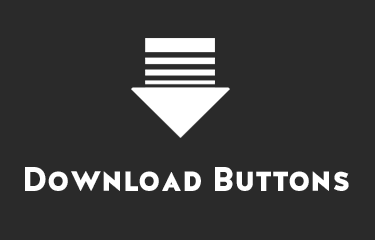
<style>
.page{position:relative;width:375px;height:240px;background:#2a2a2a}
.page>*{position:absolute;margin:0}
.t1{font:33.2px "HalisGR-SBlack";color:#ffffff}
</style>
<div class="page">
<p class="t1" style="left:25px;top:167px;width:324px;height:24px">Download Buttons</p>
</div>
